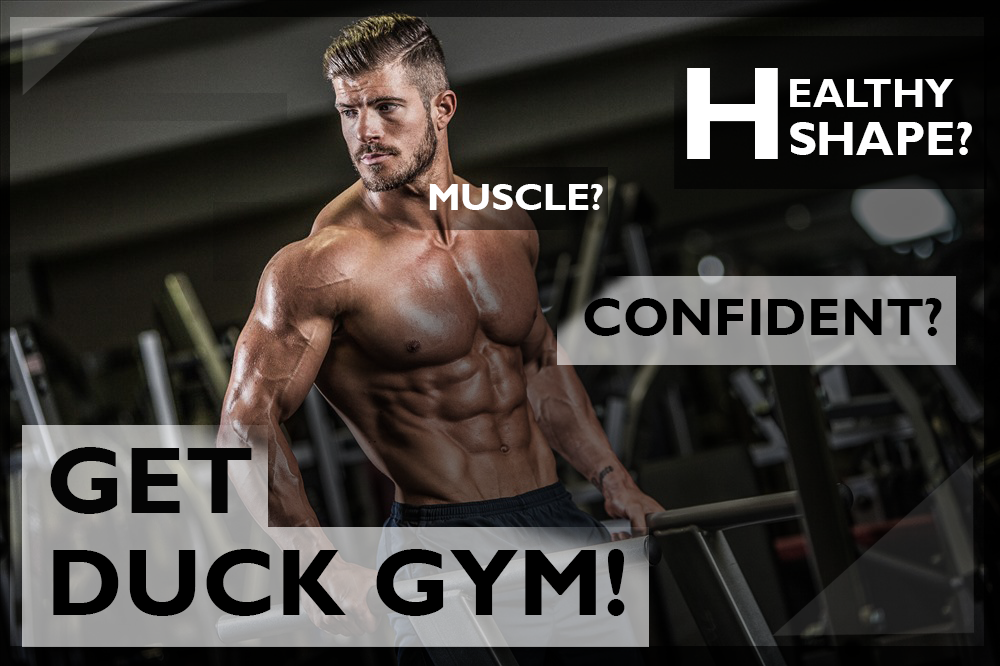
<style>
.page{position:relative;width:1000px;height:666px}
.page>*{position:absolute;margin:0}
.t1{font:133.3px "GillSansMT-Bold";color:#ffffff}
.t2{font:40px "GillSansMT-Bold";color:#ffffff}
.t3{font:48px "GillSansMT-Bold";color:#ffffff}
.t4{font:37.6px "GillSansMT-Bold";color:#ffffff}
.t5{font:53.3px "GillSansMT-Bold";color:#000000}
.t6{font:96px "GillSansMT-Bold";color:#040404}
.t7{font:96px "GillSansMT-Bold";color:#000000}
</style>
<div class="page">
<p class="t1" style="left:687px;top:68px;width:91px;height:91px">H</p>
<p class="t2" style="left:790px;top:79px;width:164px;height:28px">EALTHY</p>
<p class="t3" style="left:790px;top:122px;width:182px;height:33px">SHAPE?v</p>
<p class="t4" style="left:429px;top:184px;width:174px;height:26px">MUSCLE?</p>
<p class="t5" style="left:584px;top:298px;width:358px;height:38px">CONFIDENT?</p>
<p class="t6" style="left:50px;top:447px;width:202px;height:67px">GET</p>
<p class="t7" style="left:53px;top:549px;width:572px;height:67px">DUCK GYM!</p>
</div>
